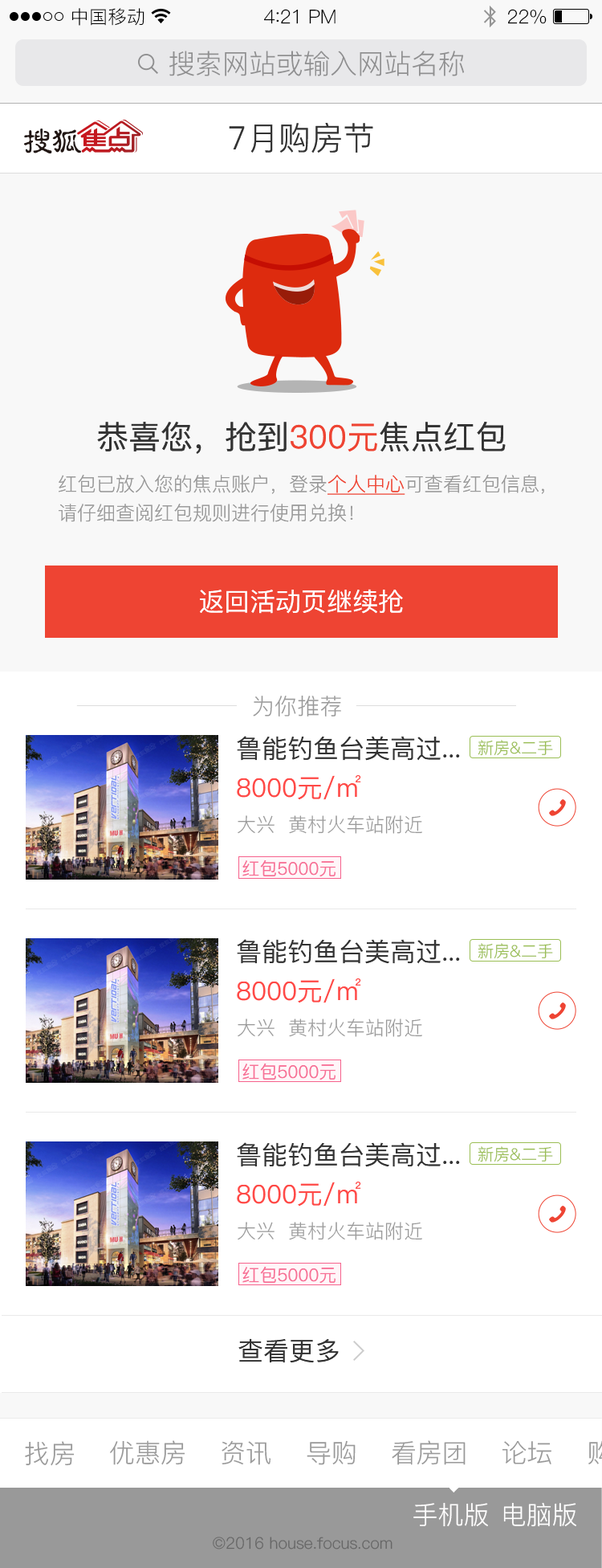
<style>
.page{position:relative;width:602px;height:1568px;background:#ffffff}
.page>*{position:absolute;margin:0}
.t1{font:18.5px "PingFang-SC-Regular";letter-spacing:0.02em;color:#000000}
.t2{font:19.3px "PingFang-SC-Regular";letter-spacing:-0.02em;color:#000000}
.t3{font:20.9px "PingFang-SC-Regular";letter-spacing:-0.02em;color:#000000}
.t4{font:27.3px "PingFang-SC-Regular";letter-spacing:-0.01em;color:#8f8f90}
.t5{font:32.1px "PingFang-SC-Regular";color:#333333}
.t6{font:32.1px "PingFang-SC-Medium";color:#333333}
.t7{font:32.1px "PingFang-SC-Medium";color:#ee4433}
.t8{font:19.3px/28.9px "PingFang-SC-Regular";color:#999999}
.t9{font:19.3px/28.9px "PingFang-SC-Regular";color:#ee4433;text-decoration:underline}
.t10{font:25.7px "PingFang-SC-Medium";color:#ffffff}
.t11{font:22.5px "PingFang-SC-Regular";color:#999999}
.t12{font:25.7px "PingFang-SC-Medium";color:#333333}
.t13{font:16.1px "PingFang-SC-Regular";color:#9abe54}
.t14{font:25.7px "PingFang-SC-Medium";color:#ff4a47}
.t15{font:19.3px "PingFang-SC-Regular";color:#999999}
.t16{font:17.7px "PingFang-SC-Medium";color:#f77096}
.t17{font:25.7px "PingFang-SC-Regular";color:#999999}
.t18{font:25.7px "PingFang-SC-Regular";color:#fffefe}
.t19{font:25.7px "PingFang-SC-Regular";color:#ffffff}
.t20{font:16.1px "PingFang-SC-Regular";color:#666666}
</style>
<div class="page">
<p class="t1" style="left:72px;top:8px;width:73px;height:18px">中国移动</p>
<p class="t2" style="left:264px;top:9px;width:72px;height:15px">4<span class="t3">:</span>21 PM</p>
<p class="t2" style="left:508px;top:9px;width:39px;height:15px">22%</p>
<p class="t4" style="left:169px;top:51px;width:295px;height:25px">搜索网站或输入网站名称</p>
<p class="t5" style="left:229px;top:122px;width:145px;height:31px">7月购房节</p>
<p class="t6" style="left:97px;top:422px;width:409px;height:32px">恭喜您，抢到<span class="t7">300元</span>焦点红包</p>
<p class="t8" style="left:59px;top:475px;width:486px;height:47px">红包已放入您的焦点账户，登录<span class="t9">个人中心</span>可查看红包信息，<br>请仔细查阅红包规则进行使用兑换！</p>
<p class="t10" style="left:200px;top:589px;width:203px;height:25px">返回活动页继续抢</p>
<p class="t11" style="left:253px;top:695px;width:88px;height:22px">为你推荐</p>
<p class="t12" style="left:237px;top:736px;width:223px;height:25px">鲁能钓鱼台美高过...</p>
<p class="t13" style="left:478px;top:740px;width:75px;height:16px">新房&amp;二手</p>
<p class="t14" style="left:237px;top:775px;width:124px;height:25px">8000元/㎡</p>
<p class="t15" style="left:238px;top:815px;width:185px;height:19px">大兴  黄村火车站附近</p>
<p class="t16" style="left:243px;top:860px;width:93px;height:17px">红包5000元</p>
<p class="t12" style="left:237px;top:939px;width:223px;height:25px">鲁能钓鱼台美高过...</p>
<p class="t13" style="left:478px;top:943px;width:75px;height:16px">新房&amp;二手</p>
<p class="t14" style="left:237px;top:978px;width:124px;height:25px">8000元/㎡</p>
<p class="t15" style="left:238px;top:1019px;width:185px;height:18px">大兴  黄村火车站附近</p>
<p class="t16" style="left:243px;top:1063px;width:93px;height:17px">红包5000元</p>
<p class="t12" style="left:237px;top:1142px;width:223px;height:25px">鲁能钓鱼台美高过...</p>
<p class="t13" style="left:478px;top:1146px;width:75px;height:16px">新房&amp;二手</p>
<p class="t14" style="left:237px;top:1182px;width:124px;height:25px">8000元/㎡</p>
<p class="t15" style="left:238px;top:1222px;width:185px;height:18px">大兴  黄村火车站附近</p>
<p class="t16" style="left:243px;top:1266px;width:93px;height:18px">红包5000元</p>
<p class="t12" style="left:239px;top:1338px;width:100px;height:25px">查看更多</p>
<p class="t17" style="left:25px;top:1441px;width:50px;height:25px">找房</p>
<p class="t17" style="left:110px;top:1440px;width:76px;height:25px">优惠房</p>
<p class="t17" style="left:222px;top:1440px;width:50px;height:25px">资讯</p>
<p class="t17" style="left:307px;top:1440px;width:49px;height:25px">导购</p>
<p class="t17" style="left:392px;top:1440px;width:74px;height:25px">看房团</p>
<p class="t17" style="left:502px;top:1440px;width:50px;height:24px">论坛</p>
<p class="t18" style="left:414px;top:1502px;width:74px;height:25px">手机版</p>
<p class="t19" style="left:504px;top:1502px;width:73px;height:25px">电脑版</p>
<p class="t20" style="left:213px;top:1537px;width:180px;height:13px">©2016 house.focus.com</p>
</div>
